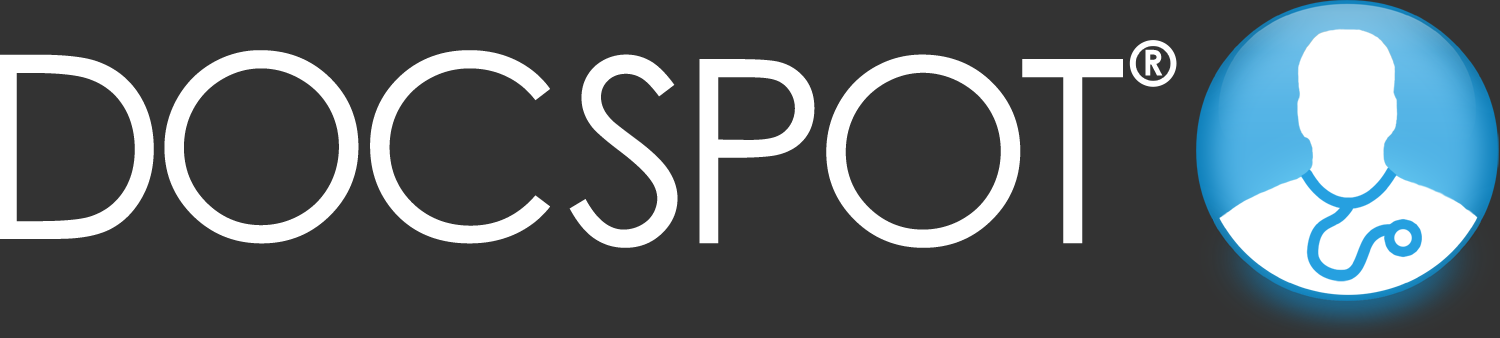
<style>
.page{position:relative;width:1500px;height:338px;background:#333333}
.page>*{position:absolute;margin:0}
.t1{font:256.2px "CenturyGothic";letter-spacing:-0.065em;color:#ffffff}
.t2{font:35.9px "CenturyGothic-Bold";letter-spacing:-0.065em;color:#ffffff}
</style>
<div class="page">
<p class="t1" style="left:0px;top:50px;width:550px;height:194px">DOC</p>
<p class="t1" style="left:569px;top:54px;width:554px;height:194px">SPOT</p>
<p class="t2" style="left:1145px;top:49px;width:18px;height:27px">R</p>
</div>
